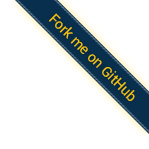
<style>
.page{position:relative;width:149px;height:149px;background:#ffffff}
.page>*{position:absolute;margin:0}
.t1{font:14px "Roboto-Regular";color:#ffce00}
</style>
<div class="page">
<p class="t1" style="left:49px;top:13px;width:86px;height:88px;rotate:45deg">Fork me on GitHub</p>
</div>
